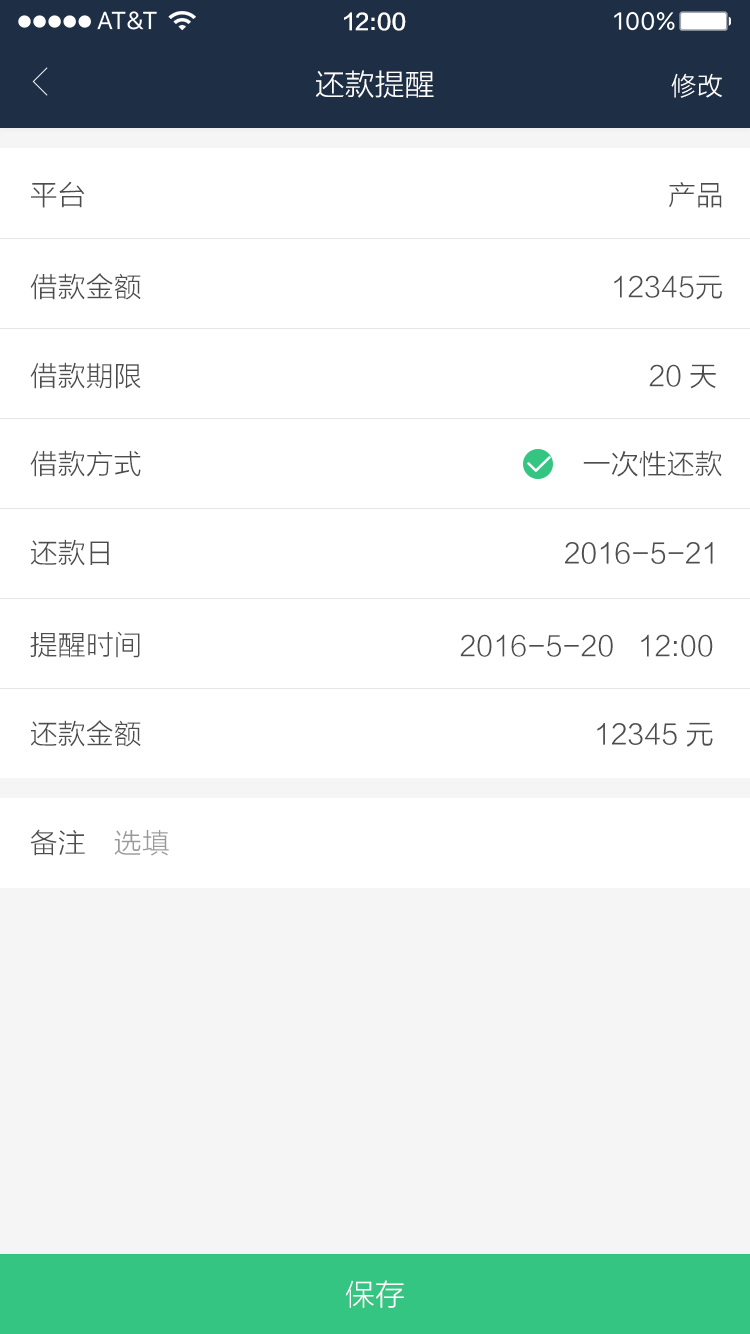
<style>
.page{position:relative;width:750px;height:1334px;background:#ffffff}
.page>*{position:absolute;margin:0}
.t1{font:22px "FZLTZHK--GBK1-0";color:#ffffff}
.t2{font:30px "FZLTXHK";color:#ffffff}
.t3{font:26px "FZLTXHK";color:#ffffff}
.t4{font:28px "FZLTXHK";color:#4d4d4d}
.t5{font:28px "FZLTXHK";color:#999999}
</style>
<div class="page">
<p class="t1" style="left:344px;top:12px;width:62px;height:19px">12:00</p>
<p class="t2" style="left:316px;top:70px;width:118px;height:28px">还款提醒</p>
<p class="t3" style="left:671px;top:73px;width:51px;height:25px">修改</p>
<p class="t4" style="left:31px;top:181px;width:54px;height:27px">平台</p>
<p class="t4" style="left:669px;top:182px;width:53px;height:26px">产品</p>
<p class="t4" style="left:30px;top:273px;width:111px;height:27px">借款金额</p>
<p class="t4" style="left:614px;top:275px;width:108px;height:25px">12345元</p>
<p class="t4" style="left:30px;top:362px;width:111px;height:27px">借款期限</p>
<p class="t4" style="left:649px;top:364px;width:32px;height:23px">20</p>
<p class="t4" style="left:690px;top:364px;width:26px;height:25px">天</p>
<p class="t4" style="left:30px;top:450px;width:111px;height:27px">借款方式</p>
<p class="t4" style="left:583px;top:450px;width:139px;height:27px">一次性还款</p>
<p class="t4" style="left:31px;top:539px;width:78px;height:27px">还款日</p>
<p class="t4" style="left:565px;top:542px;width:148px;height:22px">2016-5-21</p>
<p class="t4" style="left:30px;top:631px;width:110px;height:27px">提醒时间</p>
<p class="t4" style="left:460px;top:634px;width:253px;height:23px">2016-5-20   12:00</p>
<p class="t4" style="left:31px;top:720px;width:110px;height:27px">还款金额</p>
<p class="t4" style="left:597px;top:722px;width:116px;height:25px">12345元</p>
<p class="t4" style="left:30px;top:829px;width:55px;height:27px">备注</p>
<p class="t5" style="left:114px;top:830px;width:55px;height:26px">选填</p>
<p class="t2" style="left:346px;top:1280px;width:58px;height:28px">保存</p>
</div>
